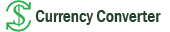
<style>
.page{position:relative;width:170px;height:32px;background:#ffffff}
.page>*{position:absolute;margin:0}
.t1{font:18px "FranklinGothic-MediumCond";color:#22422d}
</style>
<div class="page">
<p class="t1" style="left:35px;top:10px;width:58px;height:15px">Currency</p>
<p class="t1" style="left:96px;top:10px;width:65px;height:12px">Converter</p>
</div>
